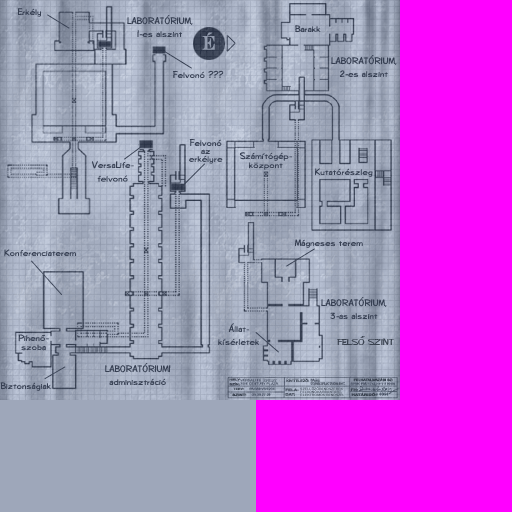
<style>
.page{position:relative;width:512px;height:512px;background:#ff00ff}
.page>*{position:absolute;margin:0}
.t1{font:9.1px "Diego-Regular";letter-spacing:0.03em;color:#374053;scale:1.06 1}
.t2{font:9.1px/12.9px "Diego-Regular";letter-spacing:0.03em;color:#374053;scale:1.06 1}
.t3{font:19.5px "EngraversCE";color:#929bad;font-weight:bold;scale:0.81 1}
.t4{font:9.1px/7.9px "Diego-Regular";letter-spacing:0.03em;color:#374053;scale:1.06 1}
.t5{font:9.1px/9.1px "Diego-Regular";letter-spacing:0.03em;color:#374053;scale:1.06 1}
.t6{font:9.2px "DiegoCE";color:#3a4250;scale:1.24 1}
.t7{font:8.2px "DiegoCE";color:#3a4250;scale:1.24 1}
.t8{font:3.2px "ArialNarrow";color:#3a4250;font-weight:bold;scale:1.37 1}
.t9{font:2.8px/4.5px "Arial-BoldMT";color:#414857;scale:1.46 1}
.t10{font:3.1px "Arial-BoldMT";color:#48505d;font-weight:bold;scale:1.13 1}
.t11{font:3.4px "TimesNewRomanPSMT";letter-spacing:-0.1em;font-weight:bold;scale:1.2 1}
.t12{font:3.2px/4.5px "Arial-BoldMT";color:#4b5362;font-weight:bold;scale:1.37 1}
.t13{font:3.1px/3.4px "Arial-BoldMT";color:#4f5665;scale:1.13 1}
.t14{font:3.2px "Arial-BoldMT";color:#3a4250;font-weight:bold;scale:1.37 1}
.t15{font:3.1px "Arial-BoldMT";color:#3a4250;font-weight:bold;scale:1.41 1}
</style>
<div class="page">
<p class="t1" style="left:17px;top:8px;width:24px;height:9px">Erkély</p>
<p class="t2" style="left:127px;top:15px;width:66px;height:22px;text-align:center">LABORATÓRIUM,<br>1-es alszint</p>
<p class="t1" style="left:295px;top:25px;width:26px;height:8px">Barakk</p>
<p class="t3" style="left:202px;top:32px;width:13px;height:18px">É</p>
<p class="t2" style="left:331px;top:55px;width:66px;height:22px;text-align:center">LABORATÓRIUM,<br>2-es alszint</p>
<p class="t1" style="left:173px;top:70px;width:51px;height:9px">Felvonó ???</p>
<p class="t4" style="left:189px;top:139px;width:34px;height:25px;text-align:center">Felvonó<br>az<br>erkélyre</p>
<p class="t1" style="left:92px;top:161px;width:42px;height:21px;text-align:center">VersaLife-<br>felvonó</p>
<p class="t5" style="left:239px;top:152px;width:53px;height:18px;text-align:center">Számítógép-<br>központ</p>
<p class="t1" style="left:315px;top:168px;width:58px;height:9px">Kutatórészleg</p>
<p class="t1" style="left:295px;top:239px;width:68px;height:9px">Mágneses terem</p>
<p class="t1" style="left:4px;top:249px;width:72px;height:8px">Konferenciaterem</p>
<p class="t2" style="left:321px;top:297px;width:66px;height:22px;text-align:center">LABORATÓRIUM,<br>3-as alszint</p>
<p class="t2" style="left:218px;top:323px;width:41px;height:22px;text-align:center">Állat-<br>kísérletek</p>
<p class="t5" style="left:18px;top:334px;width:31px;height:17px">Pihenő-<br> szoba</p>
<p class="t6" style="left:337px;top:336px;width:57px;height:9px"><span class="t7">FE</span>LSŐ SZINT</p>
<p class="t2" style="left:105px;top:363px;width:66px;height:22px;text-align:center">LABORATÓRIUMI<br>adminisztráció</p>
<p class="t8" style="left:353px;top:377px;width:40px;height:5px">FELHATALMAZÁSI SZ:</p>
<p class="t1" style="left:0px;top:382px;width:51px;height:9px">Biztonságiak</p>
<p class="t9" style="left:229px;top:378px;width:13px;height:8px">HELY-<br>SZÍN:</p>
<p class="t10" style="left:233px;top:387px;width:11px;height:3px">TERV:</p>
<p class="t11" style="left:263px;top:378px;width:14px;height:4px">ÉPÜLET</p>
<p class="t12" style="left:285px;top:388px;width:14px;height:8px">FELA-<br>DAT:</p>
<p class="t8" style="left:286px;top:379px;width:23px;height:4px">KIVITELEZŐ:</p>
<p class="t13" style="left:300px;top:387px;width:44px;height:9px">SZELLŐZŐRENDSZEREK<br>FELVONÓKARBANTART.<br>ELEKTROMOS RENDSZR.</p>
<p class="t13" style="left:311px;top:379px;width:31px;height:7px">Page<br>Építkezési Vállalat</p>
<p class="t14" style="left:350px;top:388px;width:9px;height:4px">FH:</p>
<p class="t15" style="left:232px;top:393px;width:15px;height:4px">SZINT:</p>
<p class="t14" style="left:351px;top:392px;width:26px;height:5px">HATÁRIDŐ:</p>
</div>
